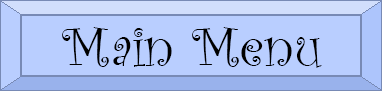
<style>
.page{position:relative;width:382px;height:91px;background:#b9ceff}
.page>*{position:absolute;margin:0}
.t1{font:58.3px "CurlzMT";color:#000000}
</style>
<div class="page">
<p class="t1" style="left:62px;top:27px;width:260px;height:41px">Main Menu</p>
</div>
